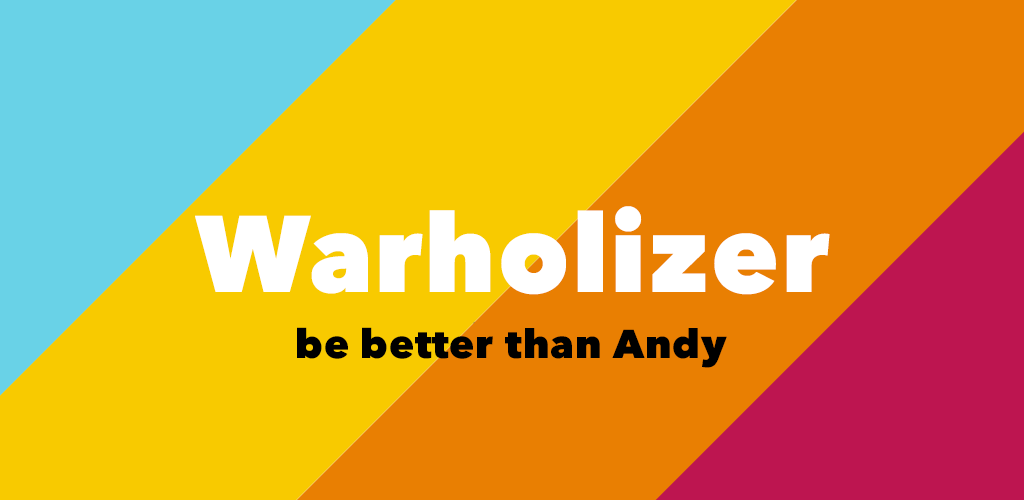
<style>
.page{position:relative;width:1024px;height:500px;background:#f8ca00}
.page>*{position:absolute;margin:0}
.t1{font:107.8px "AvenirNext-Heavy";letter-spacing:0.02em;color:#ffffff}
.t2{font:40px "AvenirNext-Heavy";letter-spacing:0.02em;color:#000000}
</style>
<div class="page">
<p class="t1" style="left:195px;top:206px;width:635px;height:89px">Warholizer</p>
<p class="t2" style="left:297px;top:327px;width:430px;height:41px">be better than Andy</p>
</div>
